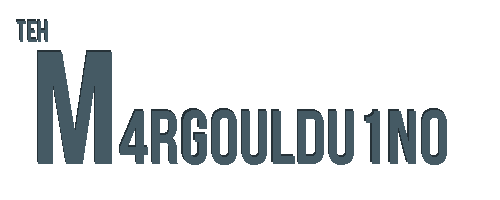
<style>
.page{position:relative;width:500px;height:200px;background:#ffffff}
.page>*{position:absolute;margin:0}
.t1{font:30px "BebasNeue"}
.t2{font:30px "BebasNeue";color:#455a64}
.t3{font:76px "BebasNeue";color:#455a64}
.t4{font:160px "BebasNeue";color:#455a64}
</style>
<div class="page">
<p class="t1" style="left:16px;top:19px;width:31px;height:21px">teh</p>
<p class="t2" style="left:17px;top:21px;width:31px;height:21px">teh</p>
<p class="t3" style="left:37px;top:50px;width:409px;height:113px"><span class="t4">M</span>4rgouldu1no</p>
<p class="t3" style="left:38px;top:52px;width:409px;height:113px"><span class="t4">M</span>4rgouldu1no</p>
</div>
